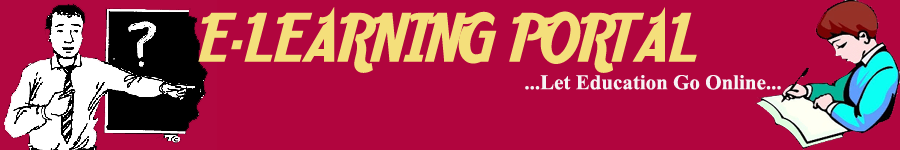
<style>
.page{position:relative;width:900px;height:150px;background:#b1053e}
.page>*{position:absolute;margin:0}
.t1{font:64.8px "AardvarkCafe";color:#f4df7b}
.t2{font:21px "TimesNewRomanPS-BoldMT";color:#f6f3f4}
</style>
<div class="page">
<p class="t1" style="left:198px;top:7px;width:499px;height:66px">E-LEARNING PORTAL</p>
<p class="t2" style="left:525px;top:75px;width:256px;height:15px">...Let Education Go Online...</p>
</div>
